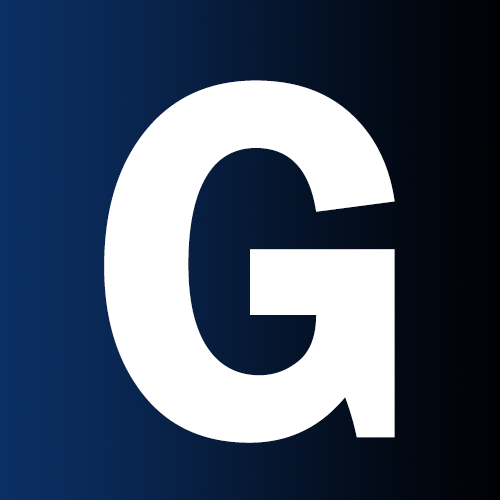
<style>
.page{position:relative;width:500px;height:500px;background:#ffffff}
.page>*{position:absolute;margin:0}
.t1{font:526.7px "FranklinGothic-Demi";color:#ffffff}
</style>
<div class="page">
<p class="t1" style="left:104px;top:80px;width:291px;height:363px">G</p>
</div>
